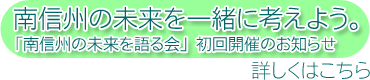
<style>
.page{position:relative;width:370px;height:80px;background:#ffffff}
.page>*{position:absolute;margin:0}
.t1{font:25px "FMotoyaCedar-W1-90mskp-RKSJ-H";color:#006666}
.t2{font:16px "FMotoyaCedar-W1-90mskp-RKSJ-H";color:#006666}
.t3{font:20px "FMotoyaCedar-W1-90mskp-RKSJ-H";color:#006666}
</style>
<div class="page">
<p class="t1" style="left:14px;top:7px;width:344px;height:24px">南信州の未来を一緒に考えよう。</p>
<p class="t2" style="left:16px;top:36px;width:320px;height:16px">「南信州の未来を語る会」初回開催のお知らせ</p>
<p class="t3" style="left:251px;top:61px;width:119px;height:19px">詳しくはこちら</p>
</div>
